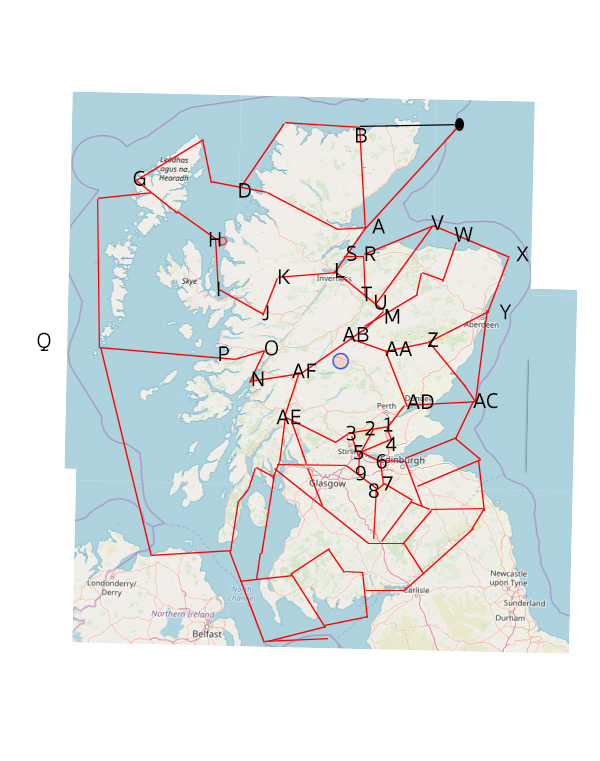
<style>
.page{position:relative;width:600px;height:761px;background:#ffffff}
.page>*{position:absolute;margin:0}
.t1{font:22px "SukhumvitSet-Medium";color:#000000}
</style>
<div class="page">
<p class="t1" style="left:356px;top:128px;width:11px;height:15px">B</p>
<p class="t1" style="left:133px;top:170px;width:13px;height:16px">G</p>
<p class="t1" style="left:239px;top:183px;width:12px;height:15px">D</p>
<p class="t1" style="left:372px;top:218px;width:13px;height:16px">A</p>
<p class="t1" style="left:431px;top:215px;width:13px;height:15px">V</p>
<p class="t1" style="left:209px;top:232px;width:12px;height:15px">H</p>
<p class="t1" style="left:454px;top:227px;width:19px;height:15px">W</p>
<p class="t1" style="left:347px;top:245px;width:10px;height:16px">S</p>
<p class="t1" style="left:365px;top:246px;width:11px;height:15px">R</p>
<p class="t1" style="left:516px;top:246px;width:13px;height:16px">X</p>
<p class="t1" style="left:279px;top:269px;width:12px;height:15px">K</p>
<p class="t1" style="left:336px;top:263px;width:9px;height:15px">L</p>
<p class="t1" style="left:217px;top:281px;width:3px;height:16px">I</p>
<p class="t1" style="left:361px;top:286px;width:11px;height:16px">T</p>
<p class="t1" style="left:375px;top:294px;width:11px;height:16px">U</p>
<p class="t1" style="left:262px;top:305px;width:7px;height:16px">J</p>
<p class="t1" style="left:499px;top:304px;width:13px;height:16px">Y</p>
<p class="t1" style="left:385px;top:309px;width:15px;height:15px">M</p>
<p class="t1" style="left:342px;top:327px;width:27px;height:15px">AB</p>
<p class="t1" style="left:37px;top:332px;width:14px;height:19px">Q</p>
<p class="t1" style="left:265px;top:340px;width:13px;height:16px">O</p>
<p class="t1" style="left:385px;top:341px;width:27px;height:15px">AA</p>
<p class="t1" style="left:428px;top:332px;width:10px;height:15px">Z</p>
<p class="t1" style="left:219px;top:346px;width:10px;height:15px">P</p>
<p class="t1" style="left:292px;top:363px;width:24px;height:16px">AF</p>
<p class="t1" style="left:252px;top:371px;width:12px;height:16px">N</p>
<p class="t1" style="left:407px;top:394px;width:27px;height:15px">AD</p>
<p class="t1" style="left:473px;top:393px;width:25px;height:16px">AC</p>
<p class="t1" style="left:276px;top:409px;width:25px;height:16px">AE</p>
<p class="t1" style="left:346px;top:425px;width:10px;height:16px">3</p>
<p class="t1" style="left:365px;top:421px;width:10px;height:15px">2</p>
<p class="t1" style="left:384px;top:417px;width:9px;height:15px">1</p>
<p class="t1" style="left:385px;top:436px;width:12px;height:15px">4</p>
<p class="t1" style="left:353px;top:445px;width:11px;height:15px">5</p>
<p class="t1" style="left:376px;top:454px;width:11px;height:15px">6</p>
<p class="t1" style="left:355px;top:465px;width:11px;height:16px">9</p>
<p class="t1" style="left:369px;top:483px;width:10px;height:15px">8</p>
<p class="t1" style="left:383px;top:476px;width:10px;height:15px">7</p>
</div>
